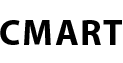
<style>
.page{position:relative;width:123px;height:63px;background:#ffffff}
.page>*{position:absolute;margin:0}
.t1{font:36px "MyriadPro-Bold";letter-spacing:0.05em;color:#000000}
</style>
<div class="page">
<p class="t1" style="left:0px;top:20px;width:122px;height:25px">CMART</p>
</div>
